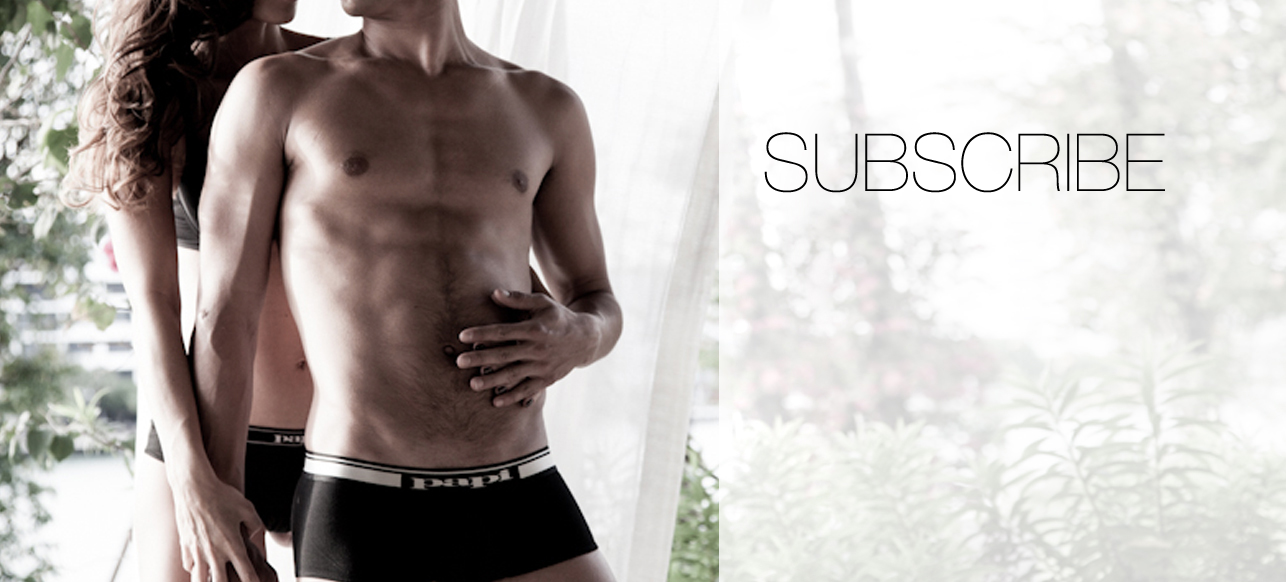
<style>
.page{position:relative;width:1286px;height:582px}
.page>*{position:absolute;margin:0}
.t1{font:80px "HelveticaNeue-UltraLight";color:#000000;text-transform:uppercase}
</style>
<div class="page">
<p class="t1" style="left:764px;top:132px;width:401px;height:61px">Subscribe</p>
</div>
